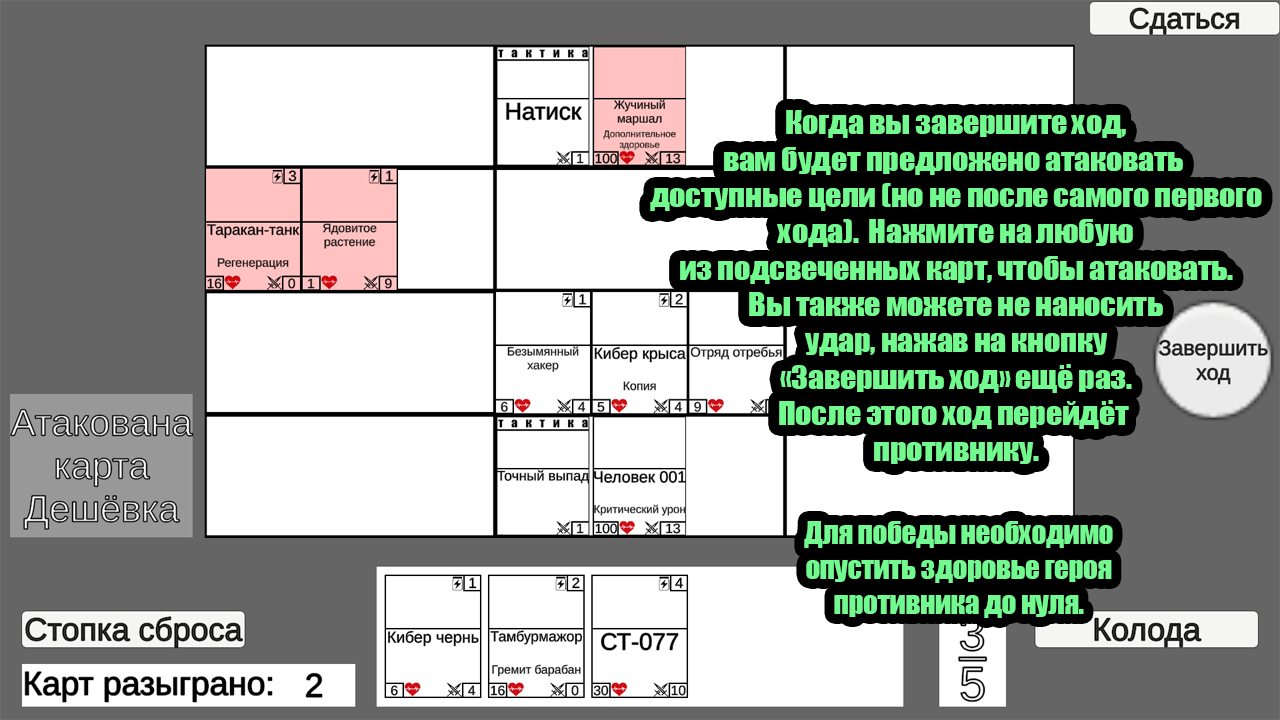
<style>
.page{position:relative;width:1280px;height:720px;background:#ffffff}
.page>*{position:absolute;margin:0}
.t1{font:30.3px/18.2px "Impact";letter-spacing:-0.015em;color:#73fa8f;scale:1.06 1}
.t2{font:29px/17.4px "Impact";letter-spacing:-0.015em;color:#72f98f}
</style>
<div class="page">
<p class="t1" style="left:650px;top:110px;width:612px;height:354px;text-align:center">Когда вы завершите ход,<br><br>вам будет предложено атаковать <br><br>доступные цели (но не после самого первого<br><br>хода).  Нажмите на любую<br><br>из подсвеченных карт, чтобы атаковать.<br><br>Вы также можете не наносить<br><br>удар, нажав на кнопку<br><br>«Завершить ход» ещё раз.<br><br>После этого ход перейдёт <br><br>противнику.</p>
<p class="t2" style="left:804px;top:521px;width:309px;height:97px;text-align:center">Для победы необходимо<br><br>опустить здоровье героя<br><br>противника до нуля.</p>
</div>
